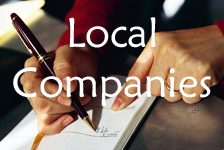
<style>
.page{position:relative;width:224px;height:150px}
.page>*{position:absolute;margin:0}
.t1{font:41.5px "MaiandraGD-Regular";color:#ffffff}
</style>
<div class="page">
<p class="t1" style="left:13px;top:17px;width:198px;height:89px;text-align:center">Local Companies</p>
</div>
